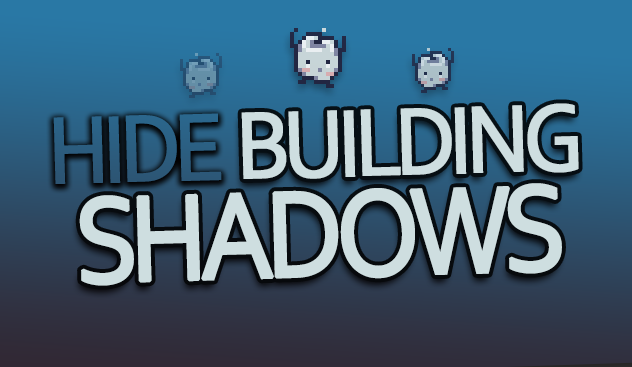
<style>
.page{position:relative;width:632px;height:367px}
.page>*{position:absolute;margin:0}
.t1{font:100px "Corbel";letter-spacing:-0.075em;color:#2b5d80;font-weight:bold;scale:0.9 1}
.t2{font:100px/100px "Corbel";letter-spacing:-0.075em;color:#cedee0;font-variant:small-caps;font-weight:bold;scale:0.9 1}
.t3{font:128px/100px "Corbel";letter-spacing:-0.075em;color:#cedee0;font-variant:small-caps;font-weight:bold;scale:0.9 1}
</style>
<div class="page">
<p class="t1" style="left:53px;top:113px;width:169px;height:71px;rotate:-2deg">HIDE</p>
<p class="t2" style="left:79px;top:103px;width:500px;height:183px;text-align:right;rotate:-2deg">BUILDING<br><span class="t3">SHADOWS</span></p>
</div>
